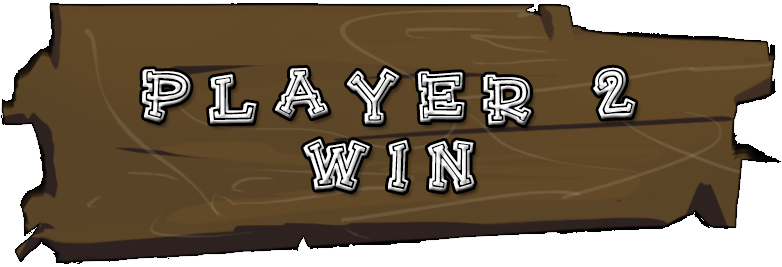
<style>
.page{position:relative;width:782px;height:267px;background:#ffffff}
.page>*{position:absolute;margin:0}
.t1{font:72px/14px "HeeHaw-Regular";letter-spacing:0.2em;color:#ffffff}
</style>
<div class="page">
<p class="t1" style="left:142px;top:67px;width:494px;height:126px;text-align:center">Player 2<br><br><br><br><br>Win</p>
</div>
